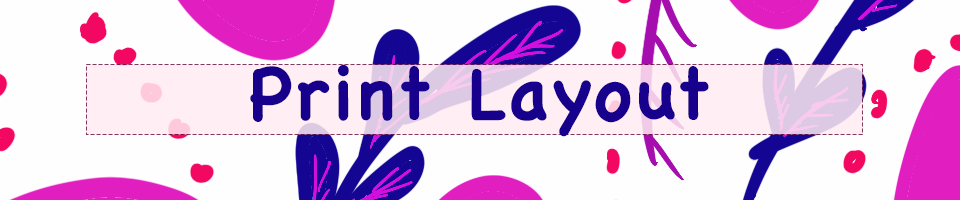
<style>
.page{position:relative;width:960px;height:200px;background:#fffeff}
.page>*{position:absolute;margin:0}
.t1{font:72px "Chalkboard-Bold";letter-spacing:0.05em;color:#16008c}
</style>
<div class="page">
<p class="t1" style="left:250px;top:64px;width:459px;height:73px">Print Layout</p>
</div>
